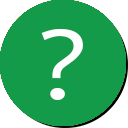
<style>
.page{position:relative;width:128px;height:128px;background:#139b4a}
.page>*{position:absolute;margin:0}
.t1{font:100px "AndaleMonoIPA";color:#ffffff;scale:1.18 1}
</style>
<div class="page">
<p class="t1" style="left:41px;top:29px;width:42px;height:71px">?</p>
</div>
